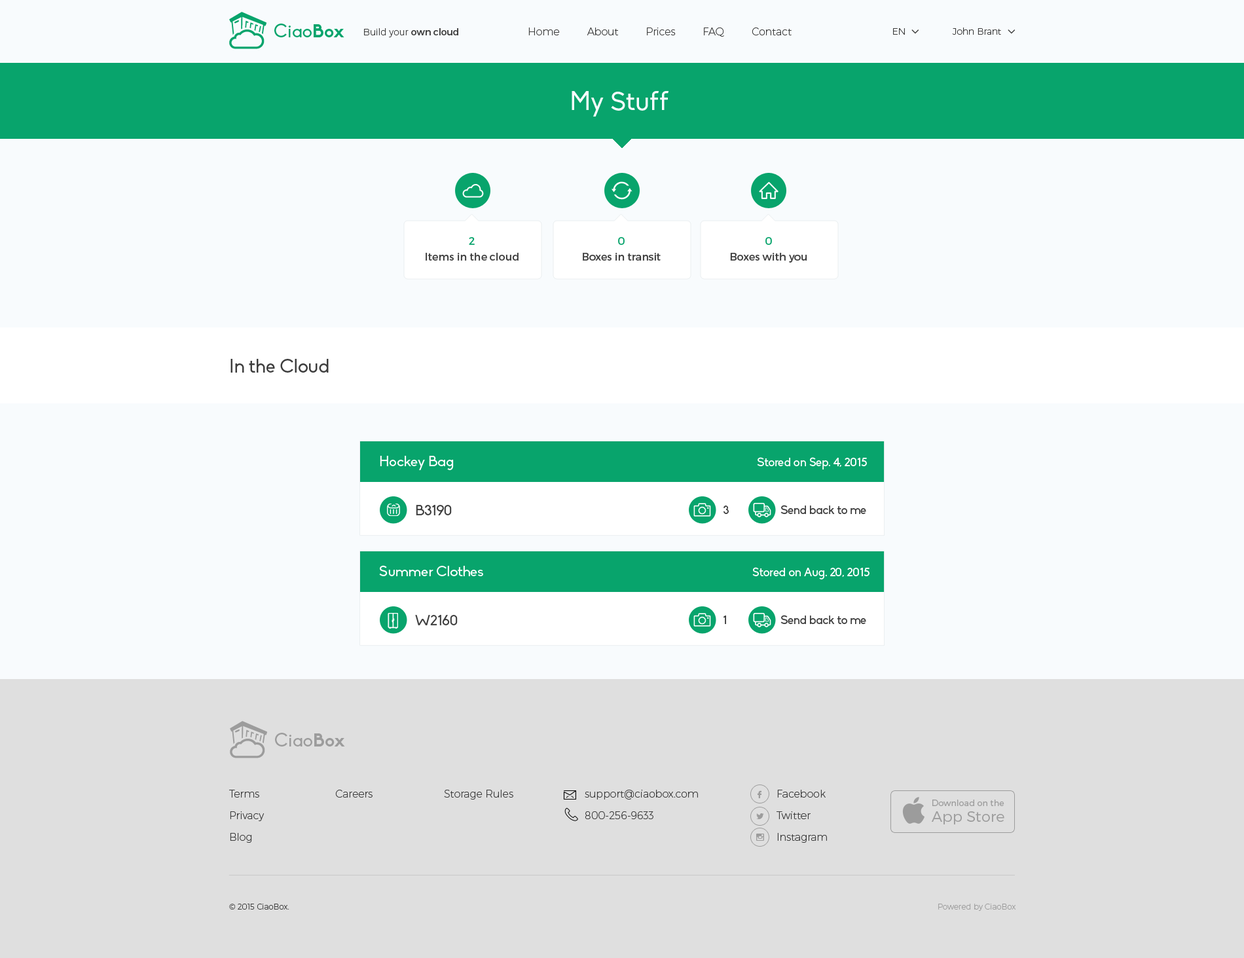
<style>
.page{position:relative;width:1244px;height:958px;background:#f8fbfd}
.page>*{position:absolute;margin:0}
.t1{font:18.3px "Biko";color:#08a46c}
.t2{font:18.3px "Biko-Bold";color:#08a46c}
.t3{font:9.2px "Montserrat-UltraLight";color:#3d3d3d}
.t4{font:9.2px "Montserrat-Regular";color:#3d3d3d}
.t5{font:10.5px "Montserrat-UltraLight";color:#3d3d3d}
.t6{font:26.2px "Biko";color:#f8fbfd}
.t7{font:10.5px/15.7px "Montserrat-Regular";color:#3d3d3d}
.t8{font:10.5px/15.7px "Montserrat-Regular";color:#08a46c}
.t9{font:19px "Biko";color:#3d3d3d}
.t10{font:14.4px "Biko";color:#ffffff}
.t11{font:11.8px "Biko";color:#ffffff}
.t12{font:14.4px "Biko";color:#3d3d3d}
.t13{font:11.8px "Biko";color:#3d3d3d}
.t14{font:18.3px "Biko";color:#9c9c9c}
.t15{font:18.3px "Biko-Bold";color:#9c9c9c}
.t16{font:10.5px/21.6px "Montserrat-UltraLight";color:#3d3d3d}
.t17{font:12.4px "Socialico";color:#9c9c9c;text-transform:uppercase}
.t18{font:8.5px/21.6px "Montserrat-Light";color:#9c9c9c}
.t19{font:14.9px/15.7px "Montserrat-Light";color:#9c9c9c}
.t20{font:7.9px "font2985";color:#9c9c9c}
.t21{font:7.9px "Montserrat-UltraLight";color:#3d3d3d}
.t22{font:7.9px "Montserrat-UltraLight";color:#9c9c9c}
</style>
<div class="page">
<p class="t1" style="left:274px;top:24px;width:71px;height:13px">Ciao<span class="t2">Box</span></p>
<p class="t3" style="left:364px;top:28px;width:94px;height:9px">Build your <span class="t4">own cloud</span></p>
<p class="t5" style="left:529px;top:28px;width:263px;height:9px">Home         About         Prices         FAQ         Contact</p>
<p class="t3" style="left:893px;top:28px;width:12px;height:7px">EN</p>
<p class="t3" style="left:952px;top:28px;width:49px;height:7px">John Brant</p>
<p class="t6" style="left:572px;top:91px;width:97px;height:26px">My Stuff</p>
<p class="t7" style="left:426px;top:237px;width:93px;height:24px;text-align:center"><span class="t8">2<br></span>Items in the cloud</p>
<p class="t7" style="left:583px;top:237px;width:78px;height:24px;text-align:center"><span class="t8">0<br></span>Boxes in transit</p>
<p class="t7" style="left:730px;top:237px;width:78px;height:26px;text-align:center"><span class="t8">0<br></span>Boxes with you</p>
<p class="t9" style="left:231px;top:359px;width:98px;height:14px">In the Cloud</p>
<p class="t10" style="left:380px;top:456px;width:74px;height:14px">Hockey Bag</p>
<p class="t11" style="left:757px;top:457px;width:110px;height:13px">Stored on Sep. 4, 2015</p>
<p class="t12" style="left:416px;top:505px;width:36px;height:10px">B3190</p>
<p class="t13" style="left:724px;top:506px;width:5px;height:8px">3</p>
<p class="t13" style="left:781px;top:505px;width:86px;height:9px">Send back to me</p>
<p class="t10" style="left:379px;top:565px;width:104px;height:11px">Summer Clothes</p>
<p class="t11" style="left:753px;top:567px;width:117px;height:13px">Stored on Aug. 20, 2015</p>
<p class="t12" style="left:415px;top:615px;width:43px;height:10px">W2160</p>
<p class="t13" style="left:723px;top:616px;width:3px;height:8px">1</p>
<p class="t13" style="left:781px;top:615px;width:86px;height:9px">Send back to me</p>
<p class="t14" style="left:275px;top:733px;width:70px;height:14px">Ciao<span class="t15">Box</span></p>
<p class="t16" style="left:229px;top:790px;width:35px;height:53px">Terms<br>Privacy<br>Blog</p>
<p class="t5" style="left:335px;top:790px;width:38px;height:8px">Careers</p>
<p class="t5" style="left:444px;top:790px;width:69px;height:10px">Storage Rules</p>
<p class="t16" style="left:585px;top:790px;width:113px;height:29px">support@ciaobox.com<br>800-256-9633</p>
<p class="t17" style="left:757px;top:791px;width:5px;height:7px">F</p>
<p class="t16" style="left:777px;top:790px;width:50px;height:53px">Facebook<br>Twitter<br>Instagram</p>
<p class="t18" style="left:932px;top:800px;width:73px;height:25px">Download on the<br><span class="t19">App Store</span></p>
<p class="t17" style="left:756px;top:813px;width:8px;height:6px">L</p>
<p class="t20" style="left:756px;top:834px;width:8px;height:7px">x</p>
<p class="t21" style="left:229px;top:904px;width:60px;height:6px">© 2015 CiaoBox.</p>
<p class="t22" style="left:939px;top:904px;width:77px;height:7px">Powered by CiaoBox</p>
</div>
